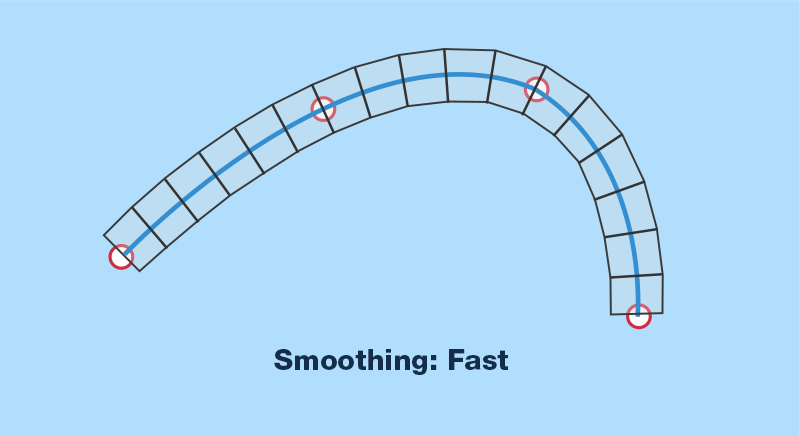
<style>
.page{position:relative;width:800px;height:436px;background:#b1defd}
.page>*{position:absolute;margin:0}
.t1{font:28.8px "HelveticaNeueCyr-Heavy";color:#142d49}
</style>
<div class="page">
<p class="t1" style="left:274px;top:349px;width:234px;height:26px">Smoothing: Fast</p>
</div>
